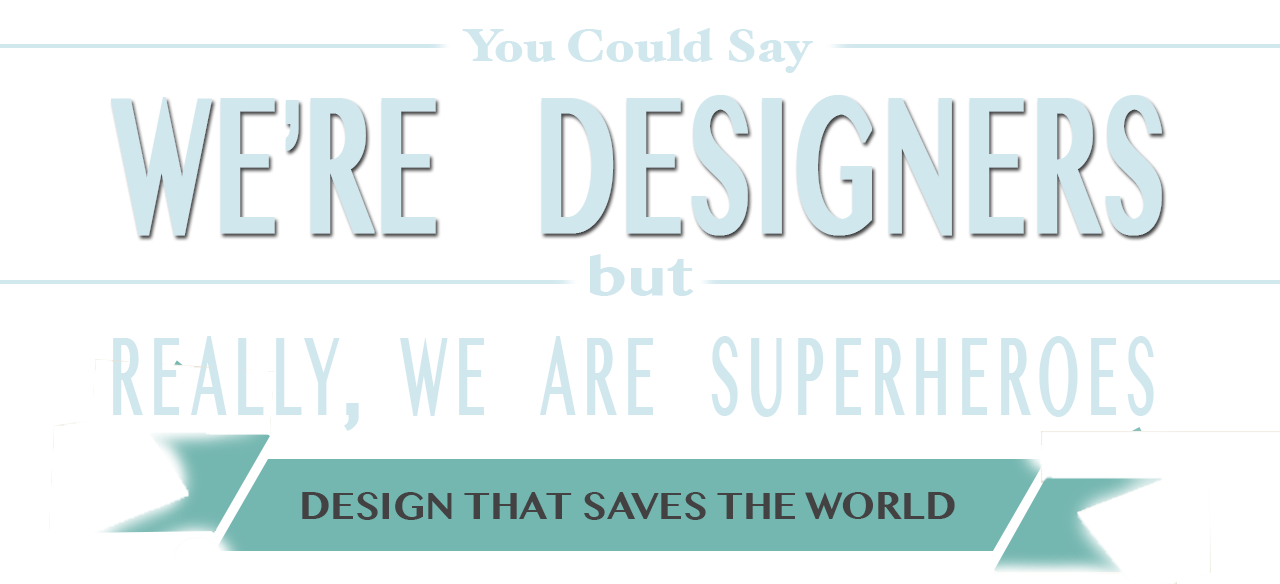
<style>
.page{position:relative;width:1280px;height:584px;background:#ffffff}
.page>*{position:absolute;margin:0}
.t1{font:45.8px "HoeflerText-Black";color:#d1e7ee;scale:1.1 1}
.t2{font:191px "GurmukhiMN-Bold";color:#d1e7ee;font-weight:bold;scale:0.52 1}
.t3{font:191px "GurmukhiSangamMN";color:#d1e7ee;font-weight:bold;scale:0.52 1}
.t4{font:52.4px "GurmukhiMN-Bold";color:#d0e6ed;scale:1.25 1}
.t5{font:110.5px "GurmukhiMN-Bold";letter-spacing:0.18em;color:#d1e7ee;scale:0.43 1}
.t6{font:110.5px "GurmukhiSangamMN-Bold";letter-spacing:0.18em;color:#d1e7ee;scale:0.86 1}
.t7{font:37.5px "GurmukhiMN-Bold";color:#434142}
</style>
<div class="page">
<p class="t1" style="left:462px;top:28px;width:351px;height:45px">You Could Say</p>
<p class="t2" style="left:111px;top:95px;width:1051px;height:141px">WE<span class="t3">’</span>RE   DESIGNERS</p>
<p class="t4" style="left:590px;top:254px;width:104px;height:42px">but</p>
<p class="t5" style="left:113px;top:336px;width:1041px;height:95px">REALLY<span class="t6">,</span> WE  ARE  SUPERHEROES</p>
<p class="t7" style="left:302px;top:492px;width:653px;height:28px">DESIGN THAT SAVES THE WORLD</p>
</div>
